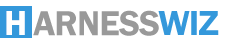
<style>
.page{position:relative;width:248px;height:39px;background:#ffffff}
.page>*{position:absolute;margin:0}
.t1{font:36px "FranklinGothic-Demi";letter-spacing:0.06em;color:#ffffff}
.t2{font:36px "FranklinGothic-Demi";letter-spacing:-0.025em;color:#999999}
.t3{font:36px "FranklinGothic-Demi";letter-spacing:-0.025em;color:#3498db}
</style>
<div class="page">
<p class="t1" style="left:6px;top:11px;width:19px;height:24px">H</p>
<p class="t2" style="left:33px;top:10px;width:126px;height:26px">ARNESS</p>
<p class="t3" style="left:158px;top:11px;width:61px;height:24px">WIZ</p>
</div>
